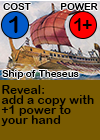
<style>
.page{position:relative;width:100px;height:140px;background:#795b01}
.page>*{position:absolute;margin:0}
.t1{font:9.7px "ArialRoundedMTBold";letter-spacing:0.01em;color:#000000}
.t2{font:24px "ArialRoundedMTBold";letter-spacing:0.01em;color:#000000}
.t3{font:18px "ArialRoundedMTBold";letter-spacing:-0.1em;color:#000000}
.t4{font:12px/10px "ArialRoundedMTBold";letter-spacing:0.01em;color:#000000}
</style>
<div class="page">
<p class="t1" style="left:3px;top:3px;width:28px;height:7px">COST</p>
<p class="t1" style="left:60px;top:3px;width:38px;height:7px">POWER</p>
<p class="t2" style="left:9px;top:16px;width:9px;height:17px">1</p>
<p class="t3" style="left:74px;top:18px;width:18px;height:13px">1+</p>
<p class="t1" style="left:2px;top:70px;width:77px;height:9px">Ship of Theseus</p>
<p class="t4" style="left:1px;top:85px;width:93px;height:41px">Reveal:<br>add a copy with<br>+1 power to<br>your hand</p>
</div>
